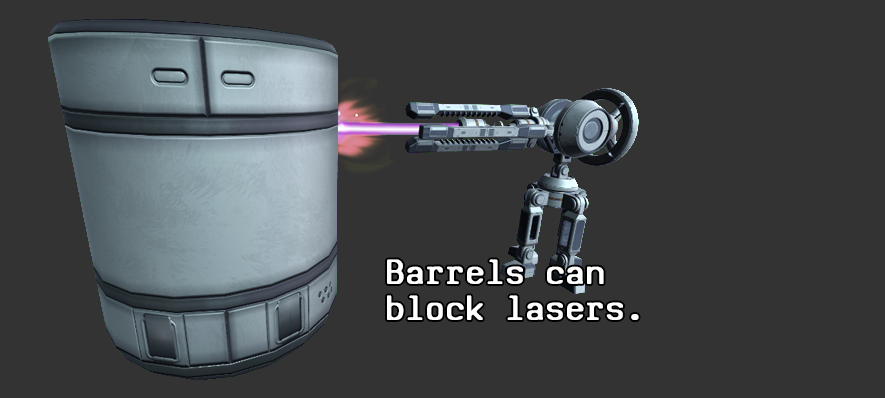
<style>
.page{position:relative;width:885px;height:398px;background:#333333}
.page>*{position:absolute;margin:0}
.t1{font:37.8px/36px "SVBasicManual-Bold";letter-spacing:0.05em;color:#ffffff;scale:0.95 1}
</style>
<div class="page">
<p class="t1" style="left:387px;top:259px;width:252px;height:61px">Barrels can<br>block lasers.</p>
</div>
